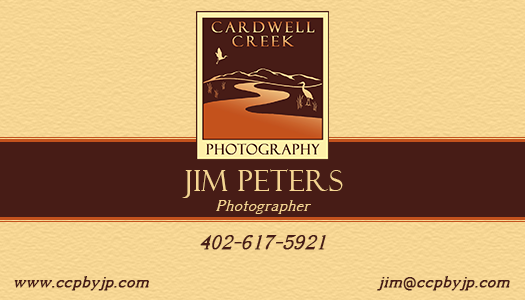
<style>
.page{position:relative;width:525px;height:300px;background:#471c16}
.page>*{position:absolute;margin:0}
.t1{font:29.2px "FelixTitlingMT";letter-spacing:0.025em;color:#f6d693}
.t2{font:16.7px "EuroRomanOblique";letter-spacing:0.025em;color:#f6d693}
.t3{font:20.8px "EuroRomanOblique";letter-spacing:0.025em;color:#471c16;font-weight:bold}
.t4{font:16.7px "EuroRomanOblique";letter-spacing:0.025em;color:#471c16;font-weight:bold}
.t5{font:12.5px "EuphemiaUCAS";letter-spacing:0.025em;color:#471c16;font-weight:bold}
</style>
<div class="page">
<p class="t1" style="left:182px;top:169px;width:161px;height:29px">jim peters</p>
<p class="t2" style="left:216px;top:200px;width:95px;height:14px">Photographer</p>
<p class="t3" style="left:200px;top:235px;width:126px;height:15px">402-617-5921</p>
<p class="t4" style="left:14px;top:276px;width:135px;height:15px">www.ccpbyjp.com</p>
<p class="t4" style="left:377px;top:276px;width:133px;height:15px">jim<span class="t5">@</span>ccpbyjp.com</p>
</div>
